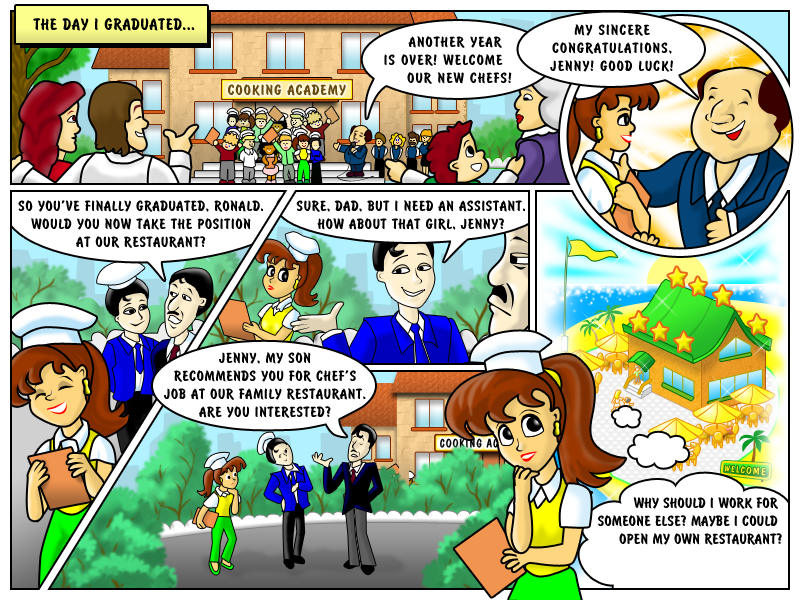
<style>
.page{position:relative;width:800px;height:600px;background:#ffffff}
.page>*{position:absolute;margin:0}
.t1{font:18px "BrushType-Bold";letter-spacing:0.05em;color:#000000}
.t2{font:16px/18px "BrushType-Bold";letter-spacing:0.075em;color:#000000}
.t3{font:16px "BrushType-Bold";letter-spacing:0.075em;color:#000000}
.t4{font:16px "BrushType-Bold";letter-spacing:0.075em;color:#664b14;text-transform:uppercase}
.t5{font:16px/18px "BrushType-Bold";letter-spacing:0.05em;color:#000000;text-transform:uppercase}
.t6{font:16px/18px "BrushType-Bold";letter-spacing:0.025em;color:#000000;text-transform:uppercase}
</style>
<div class="page">
<p class="t1" style="left:33px;top:18px;width:162px;height:13px">THE DAY I GRADUATED...</p>
<p class="t2" style="left:550px;top:24px;width:123px;height:48px;text-align:center">MY SINCERE<br>CONGRATULATIONS,<br>JENNY! GOOD LUCK!</p>
<p class="t3" style="left:408px;top:36px;width:94px;height:12px">ANOTHER YEAR</p>
<p class="t3" style="left:384px;top:54px;width:119px;height:12px">IS OVER! WELCOME</p>
<p class="t3" style="left:407px;top:72px;width:105px;height:12px">OUR NEW CHEFS!</p>
<p class="t4" style="left:228px;top:84px;width:118px;height:12px">cooking academy</p>
<p class="t5" style="left:18px;top:200px;width:245px;height:48px;text-align:center">So you’ve finally graduated, Ronald.<br>WOULD YOU NOW TAKE THE POSITION<br>AT OUR RESTAURANT?</p>
<p class="t5" style="left:296px;top:200px;width:229px;height:30px;text-align:center">Sure, Dad, BUT I NEED AN ASSISTANT. <br>HOW ABOUT that girl, Jenny?</p>
<p class="t5" style="left:164px;top:352px;width:202px;height:66px;text-align:center">JENNY, my son <br>recommends you for chef’s <br>job at our family restaurant.<br>ARE YOU INTERESTED?</p>
<p class="t6" style="left:598px;top:497px;width:184px;height:48px;text-align:right">Why should I work for <br>someone else? Maybe I could <br>open MY OWN RESTAURANT?</p>
</div>
